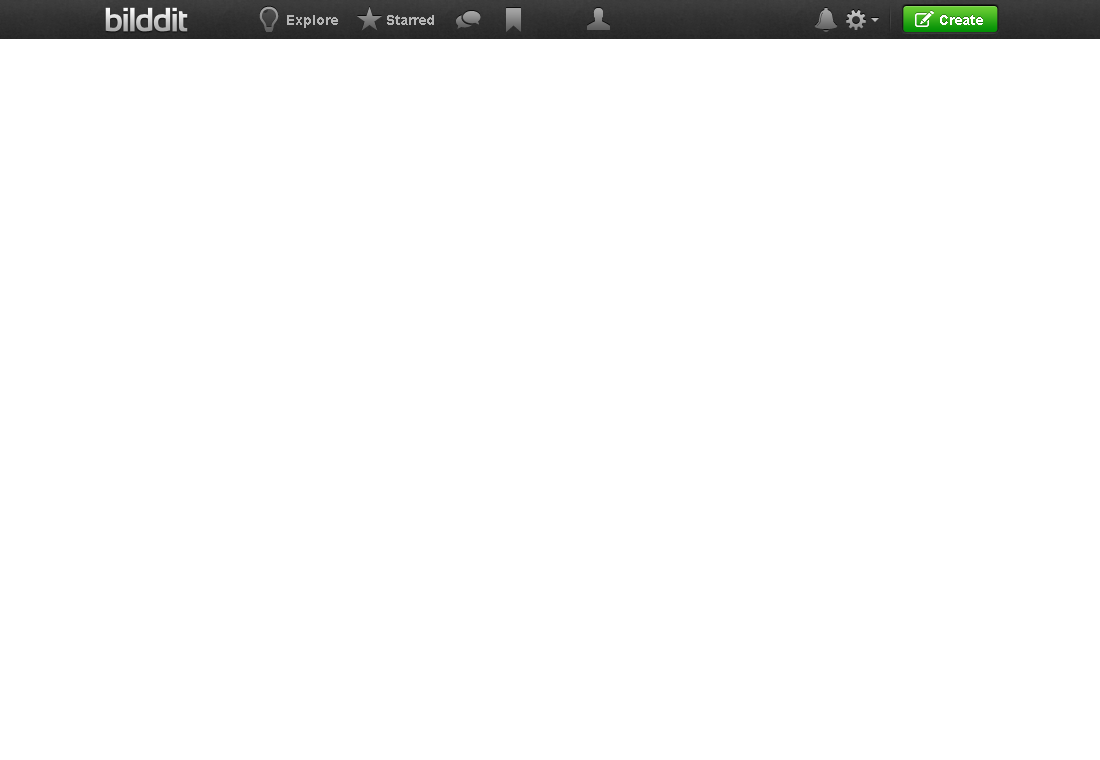
<style>
.page{position:relative;width:1100px;height:760px;background:#ffffff}
.page>*{position:absolute;margin:0}
.t1{font:14px "Arial-BoldMT";color:#b5b5b5}
.t2{font:14px "Arial-BoldMT";color:#ffffff}
</style>
<div class="page">
<p class="t1" style="left:287px;top:15px;width:147px;height:13px">Explore            Starred</p>
<p class="t2" style="left:940px;top:15px;width:43px;height:10px">Create</p>
</div>
